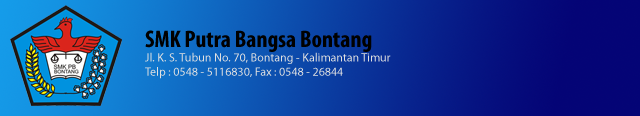
<style>
.page{position:relative;width:640px;height:116px}
.page>*{position:absolute;margin:0}
.t1{font:12px "MyriadPro-Regular";color:#e1e1e1}
.t2{font:24px "MyriadPro-BoldCond";color:#000000}
</style>
<div class="page">
<p class="t1" style="left:145px;top:30px;width:246px;height:49px"><span class="t2">SMK Putra Bangsa Bontang<br></span>Jl. K. S. Tubun No. 70, Bontang - Kalimantan Timur<br>Telp : 0548 - 5116830, Fax : 0548 - 26844</p>
</div>
